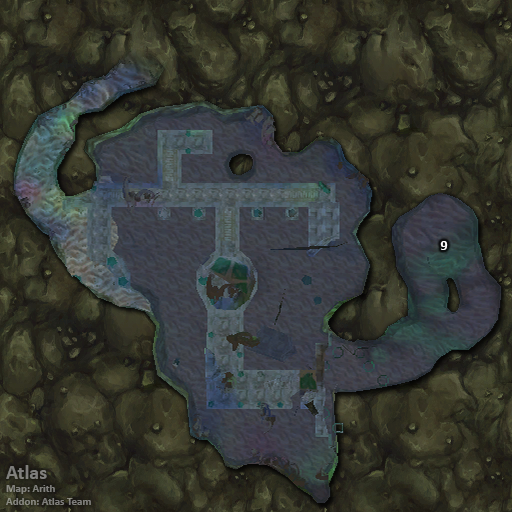
<style>
.page{position:relative;width:512px;height:512px}
.page>*{position:absolute;margin:0}
.t1{font:14px "Calibri-Bold";color:#ffffff}
.t2{font:11px "Calibri-Bold";color:#7f7f7c}
.t3{font:20px "Calibri-Bold";color:#7f7f7c}
</style>
<div class="page">
<p class="t1" style="left:440px;top:241px;width:8px;height:9px">9</p>
<p class="t2" style="left:6px;top:465px;width:85px;height:40px"><span class="t3">Atlas<br></span>Map: Arith<br>Addon: Atlas Team</p>
</div>
